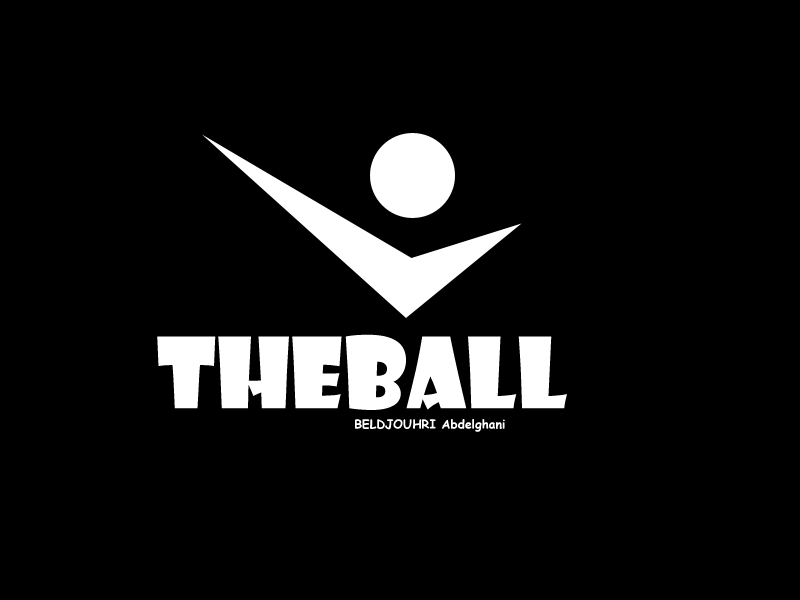
<style>
.page{position:relative;width:800px;height:600px;background:#000000}
.page>*{position:absolute;margin:0}
.t1{font:95.7px "ShowcardGothic-Reg";color:#ffffff}
.t2{font:12.3px "ComicSansMS-Bold";color:#ffffff}
</style>
<div class="page">
<p class="t1" style="left:157px;top:334px;width:410px;height:76px">theBall</p>
<p class="t2" style="left:355px;top:419px;width:150px;height:13px">BELDJOUHRI Abdelghani</p>
</div>
